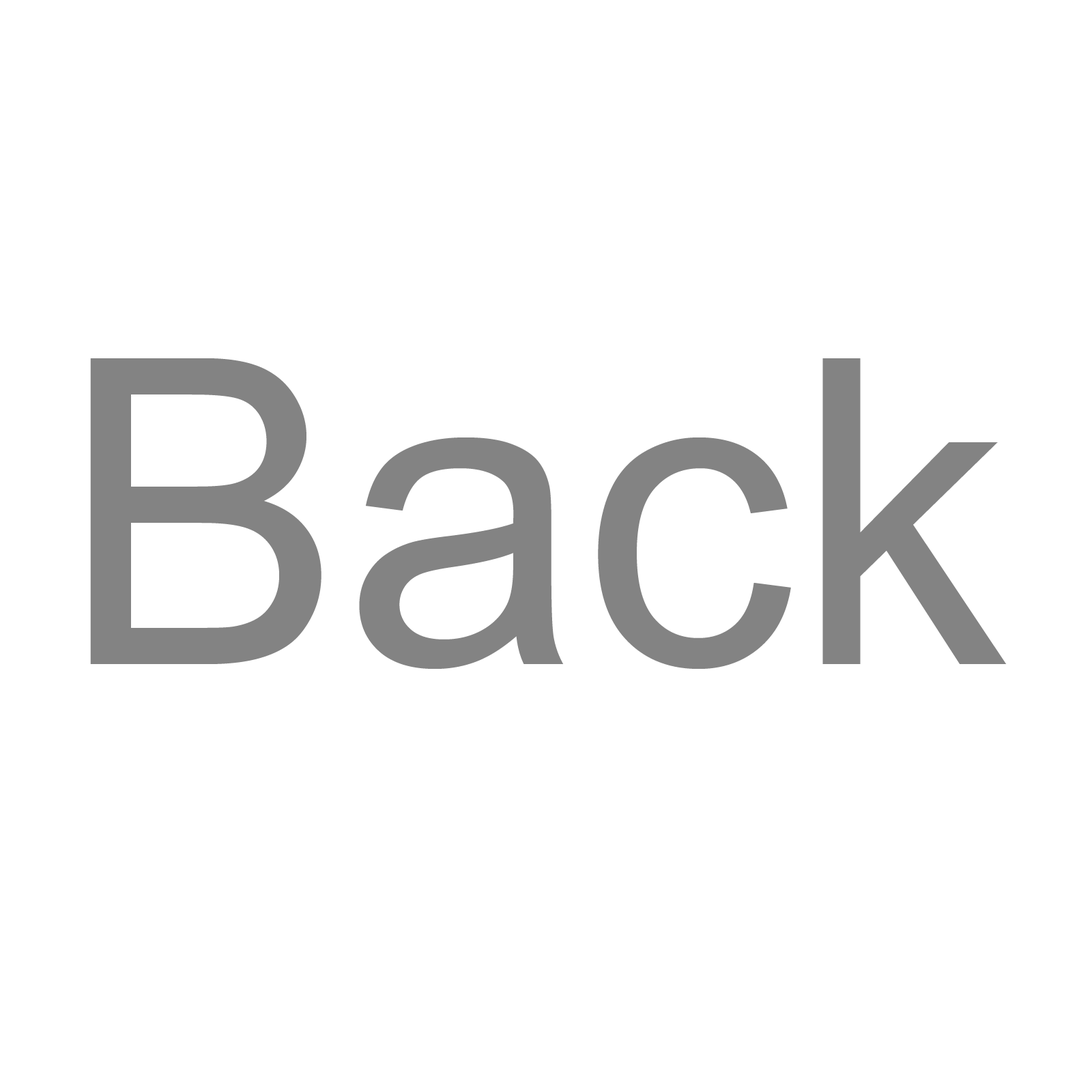
<style>
.page{position:relative;width:1092px;height:1092px;background:#ffffff}
.page>*{position:absolute;margin:0}
.t1{font:426.6px "ArialMT";color:#838383}
</style>
<div class="page">
<p class="t1" style="left:90px;top:358px;width:917px;height:311px">Back</p>
</div>
